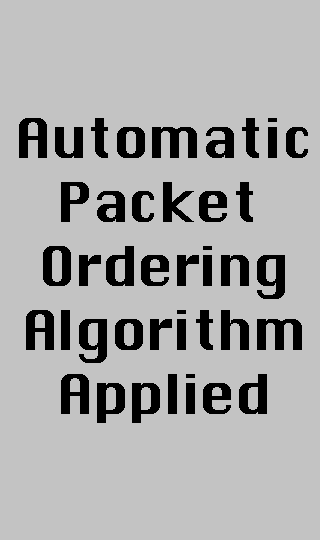
<style>
.page{position:relative;width:320px;height:540px;background:#c3c3c3}
.page>*{position:absolute;margin:0}
.t1{font:53.3px "Silom";color:#000000}
</style>
<div class="page">
<p class="t1" style="left:19px;top:118px;width:289px;height:305px;text-align:center">Automatic<br>Packet <br>Ordering<br>Algorithm<br>Applied</p>
</div>
